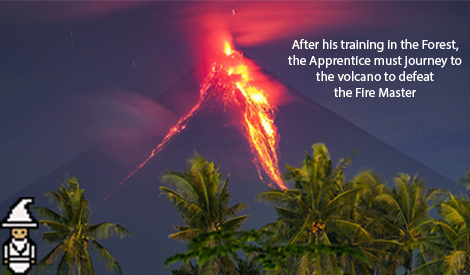
<style>
.page{position:relative;width:470px;height:275px}
.page>*{position:absolute;margin:0}
.t1{font:13.3px "MyriadPro-Regular";color:#ffffff}
</style>
<div class="page">
<p class="t1" style="left:288px;top:39px;width:174px;height:58px;text-align:center">After his training in the Forest,<br>the Apprentice must journey to<br>the volcano to defeat<br>the Fire Master</p>
</div>
